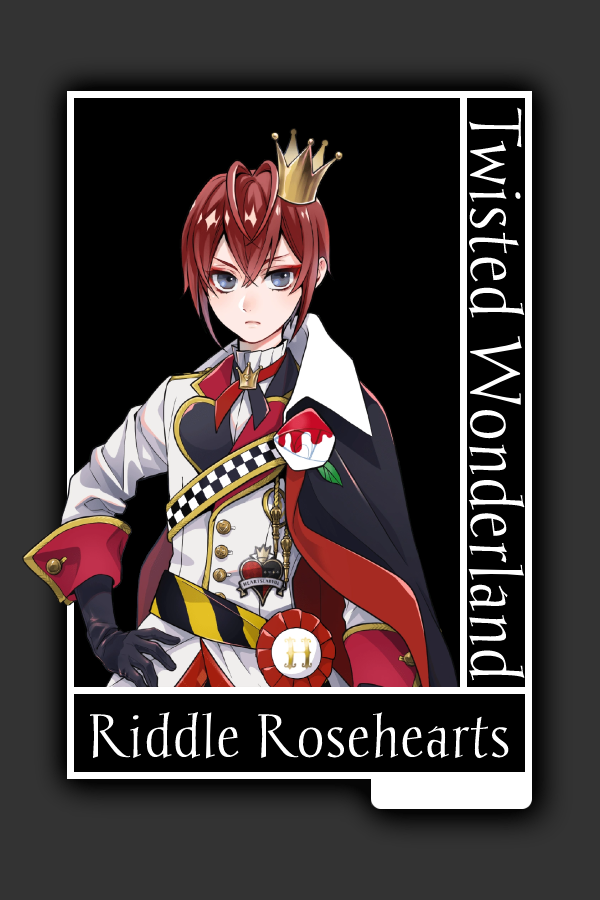
<style>
.page{position:relative;width:600px;height:900px;background:#000000}
.page>*{position:absolute;margin:0}
.t1{font:60px "Chantelli-Antiqua";color:#ffffff}
.t2{font:50px "Chantelli-Antiqua";color:#ffffff}
</style>
<div class="page">
<p class="t1" style="left:468px;top:107px;width:57px;height:574px;rotate:90deg">Twisted Wonderland</p>
<p class="t2" style="left:90px;top:712px;width:419px;height:49px">Riddle Rosehearts</p>
</div>
